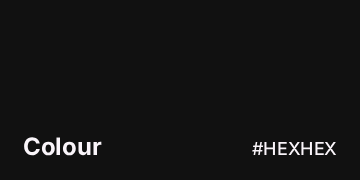
<style>
.page{position:relative;width:360px;height:180px;background:#111111}
.page>*{position:absolute;margin:0}
.t1{font:24px "Inter-Bold";color:#faf5fa}
.t2{font:18px "Inter-Medium";color:#faf5fa}
</style>
<div class="page">
<p class="t1" style="left:24px;top:137px;width:78px;height:19px">Colour</p>
<p class="t2" style="left:252px;top:141px;width:85px;height:14px">#HEXHEX</p>
</div>
